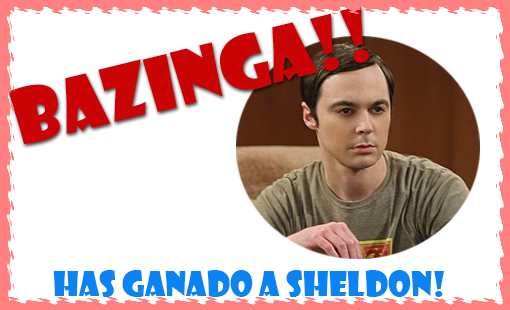
<style>
.page{position:relative;width:510px;height:310px;background:#ffffff}
.page>*{position:absolute;margin:0}
.t1{font:72.6px "ShowcardGothic-Reg";color:#ca0404}
.t2{font:33.4px "ShowcardGothic-Reg";color:#0a83f3}
</style>
<div class="page">
<p class="t1" style="left:8px;top:5px;width:361px;height:139px;rotate:-14deg">Bazinga!!</p>
<p class="t2" style="left:53px;top:270px;width:392px;height:27px">Has ganado a SHeldon!</p>
</div>
